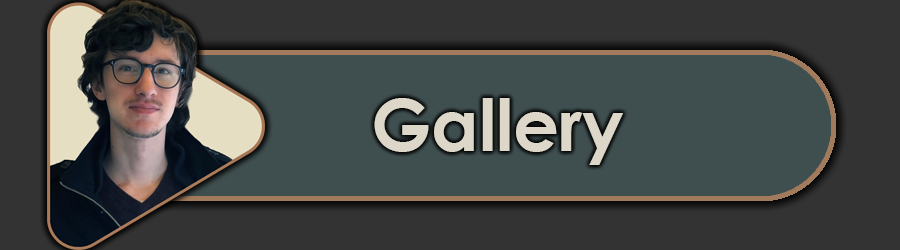
<style>
.page{position:relative;width:900px;height:250px;background:#333333}
.page>*{position:absolute;margin:0}
.t1{font:72px "CenturyGothic-Bold";color:#dcd7c9}
</style>
<div class="page">
<p class="t1" style="left:374px;top:98px;width:249px;height:67px">Gallery</p>
</div>
